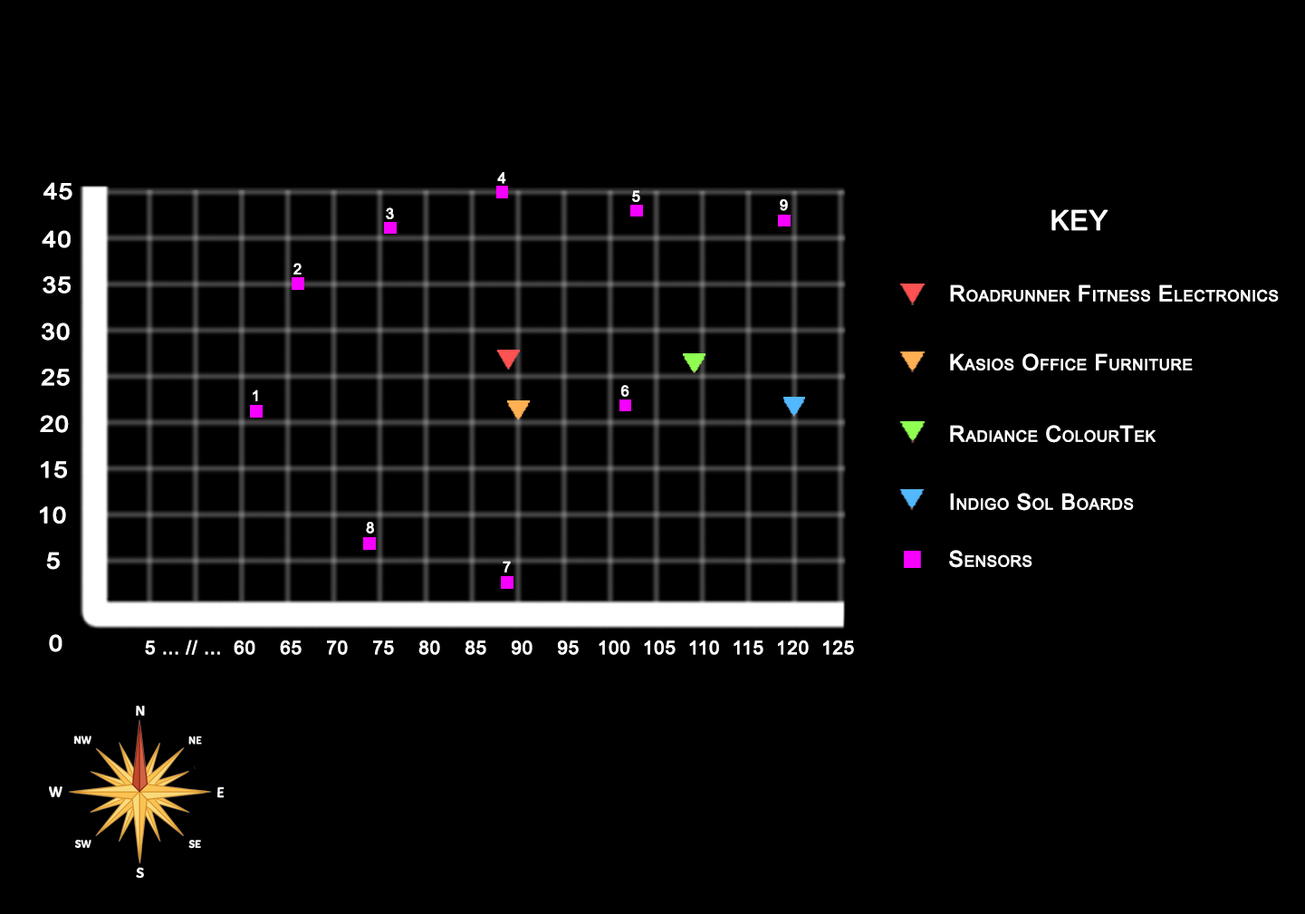
<style>
.page{position:relative;width:1305px;height:914px;background:#000000}
.page>*{position:absolute;margin:0}
.t1{font:14.8px "ArialMT";letter-spacing:0.02em;color:#ffffff;font-variant:small-caps;font-weight:bold}
.t2{font:22.2px "ArialMT";letter-spacing:0.02em;color:#ffffff;font-variant:small-caps;font-weight:bold;scale:1.12 1}
.t3{font:27.3px "ArialMT";letter-spacing:0.02em;color:#ffffff;font-variant:small-caps;font-weight:bold}
.t4{font:21.7px "ArialMT";letter-spacing:0.02em;color:#ffffff;font-variant:small-caps;font-weight:bold}
.t5{font:18.4px "ArialMT";letter-spacing:0.02em;color:#ffffff;font-variant:small-caps;font-weight:bold}
</style>
<div class="page">
<p class="t1" style="left:497px;top:172px;width:9px;height:12px">4</p>
<p class="t2" style="left:43px;top:182px;width:29px;height:18px">45</p>
<p class="t1" style="left:632px;top:190px;width:8px;height:12px">5</p>
<p class="t1" style="left:386px;top:207px;width:8px;height:12px">3</p>
<p class="t1" style="left:780px;top:199px;width:8px;height:12px">9</p>
<p class="t3" style="left:1051px;top:209px;width:57px;height:22px">KEY</p>
<p class="t2" style="left:42px;top:230px;width:29px;height:18px">40</p>
<p class="t1" style="left:293px;top:263px;width:9px;height:11px">2</p>
<p class="t2" style="left:43px;top:276px;width:28px;height:17px">35</p>
<p class="t4" style="left:950px;top:284px;width:329px;height:18px">Roadrunner Fitness Electronics</p>
<p class="t2" style="left:42px;top:322px;width:28px;height:19px">30</p>
<p class="t4" style="left:950px;top:353px;width:243px;height:18px">Kasios Office Furniture</p>
<p class="t2" style="left:41px;top:369px;width:29px;height:17px">25</p>
<p class="t1" style="left:253px;top:389px;width:5px;height:12px">1</p>
<p class="t1" style="left:620px;top:385px;width:9px;height:12px">6</p>
<p class="t2" style="left:40px;top:415px;width:29px;height:18px">20</p>
<p class="t4" style="left:950px;top:425px;width:206px;height:18px">Radiance ColourTek</p>
<p class="t2" style="left:41px;top:461px;width:26px;height:17px">15</p>
<p class="t4" style="left:950px;top:493px;width:184px;height:18px">Indigo Sol Boards</p>
<p class="t2" style="left:40px;top:506px;width:26px;height:17px">10</p>
<p class="t1" style="left:366px;top:522px;width:8px;height:11px">8</p>
<p class="t2" style="left:46px;top:552px;width:14px;height:18px">5</p>
<p class="t4" style="left:949px;top:550px;width:83px;height:18px">Sensors</p>
<p class="t1" style="left:503px;top:561px;width:8px;height:11px">7</p>
<p class="t2" style="left:49px;top:634px;width:13px;height:18px">0</p>
<p class="t5" style="left:145px;top:639px;width:709px;height:16px">5 ... // ...  60    65    70    75    80    85    90    95   100  105  110  115  120  125</p>
</div>
